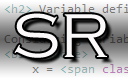
<style>
.page{position:relative;width:128px;height:79px}
.page>*{position:absolute;margin:0}
.t1{font:64px "CopperplateGothic-Light";color:#fbf9f9}
</style>
<div class="page">
<p class="t1" style="left:14px;top:13px;width:93px;height:45px">SR</p>
</div>
